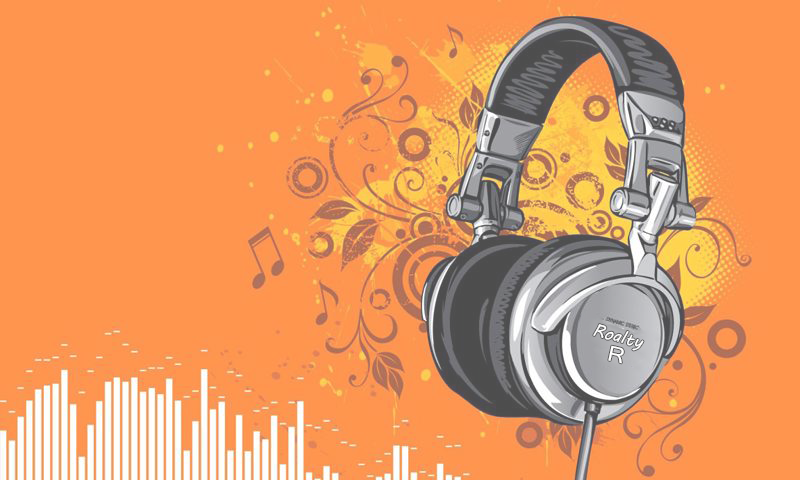
<style>
.page{position:relative;width:800px;height:480px;background:#ff954e}
.page>*{position:absolute;margin:0}
.t1{font:17px "MVBoli";color:#ffffff}
.t2{font:20.9px "MicrosoftSansSerif";color:#ffffff;scale:1.11 1}
</style>
<div class="page">
<p class="t1" style="left:593px;top:324px;width:51px;height:27px;rotate:-2deg">Roalty</p>
<p class="t2" style="left:608px;top:345px;width:16px;height:19px;rotate:12deg">R</p>
</div>
